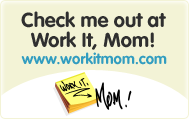
<style>
.page{position:relative;width:189px;height:120px;background:#f3f3d6}
.page>*{position:absolute;margin:0}
.t1{font:20.1px/20.1px "VAGRounded-Bold";color:#2f2f2f}
.t2{font:15px "VAGRounded-Bold";color:#329dc0}
</style>
<div class="page">
<p class="t1" style="left:21px;top:11px;width:145px;height:39px;text-align:center">Check me out at Work It, Mom!</p>
<p class="t2" style="left:21px;top:52px;width:146px;height:13px">www.workitmom.com</p>
</div>
